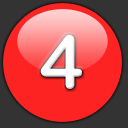
<style>
.page{position:relative;width:128px;height:128px;background:#fe2323}
.page>*{position:absolute;margin:0}
.t1{font:73.1px "ArialRoundedMTBold";color:#ffffff}
</style>
<div class="page">
<p class="t1" style="left:40px;top:35px;width:42px;height:54px">4</p>
</div>
